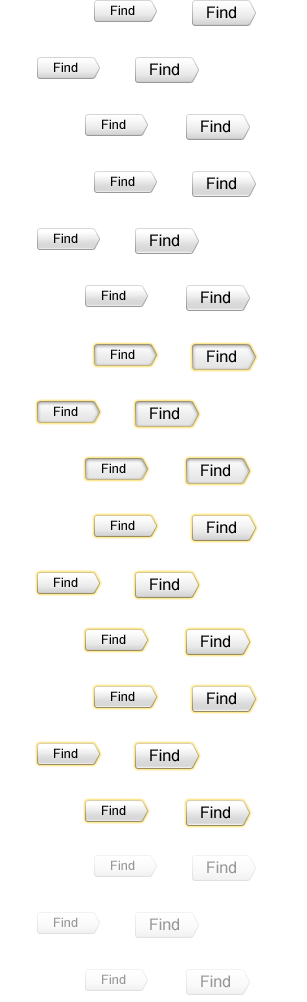
<style>
.page{position:relative;width:307px;height:1002px;background:#ffffff}
.page>*{position:absolute;margin:0}
.t1{font:13px "ArialMT";color:#000000}
.t2{font:16px "ArialMT";color:#000000}
.t3{font:13px "ArialMT";color:#979797}
.t4{font:16px "ArialMT";color:#969696}
</style>
<div class="page">
<p class="t1" style="left:111px;top:5px;width:24px;height:10px">Find</p>
<p class="t2" style="left:207px;top:6px;width:29px;height:13px">Find</p>
<p class="t1" style="left:54px;top:62px;width:24px;height:10px">Find</p>
<p class="t2" style="left:150px;top:63px;width:29px;height:13px">Find</p>
<p class="t1" style="left:102px;top:119px;width:24px;height:10px">Find</p>
<p class="t2" style="left:201px;top:120px;width:29px;height:13px">Find</p>
<p class="t1" style="left:111px;top:176px;width:24px;height:10px">Find</p>
<p class="t2" style="left:207px;top:177px;width:29px;height:13px">Find</p>
<p class="t1" style="left:54px;top:233px;width:24px;height:10px">Find</p>
<p class="t2" style="left:150px;top:234px;width:29px;height:13px">Find</p>
<p class="t1" style="left:102px;top:290px;width:24px;height:10px">Find</p>
<p class="t2" style="left:201px;top:291px;width:29px;height:13px">Find</p>
<p class="t1" style="left:111px;top:349px;width:24px;height:10px">Find</p>
<p class="t2" style="left:207px;top:350px;width:29px;height:13px">Find</p>
<p class="t1" style="left:54px;top:406px;width:24px;height:10px">Find</p>
<p class="t2" style="left:150px;top:407px;width:29px;height:13px">Find</p>
<p class="t1" style="left:102px;top:463px;width:24px;height:10px">Find</p>
<p class="t2" style="left:201px;top:464px;width:29px;height:13px">Find</p>
<p class="t1" style="left:111px;top:520px;width:24px;height:10px">Find</p>
<p class="t2" style="left:207px;top:521px;width:29px;height:13px">Find</p>
<p class="t1" style="left:54px;top:577px;width:24px;height:10px">Find</p>
<p class="t2" style="left:150px;top:578px;width:29px;height:13px">Find</p>
<p class="t1" style="left:102px;top:634px;width:24px;height:10px">Find</p>
<p class="t2" style="left:201px;top:635px;width:29px;height:13px">Find</p>
<p class="t1" style="left:111px;top:691px;width:24px;height:10px">Find</p>
<p class="t2" style="left:207px;top:692px;width:29px;height:13px">Find</p>
<p class="t1" style="left:54px;top:748px;width:24px;height:10px">Find</p>
<p class="t2" style="left:150px;top:749px;width:29px;height:13px">Find</p>
<p class="t1" style="left:102px;top:805px;width:24px;height:10px">Find</p>
<p class="t2" style="left:201px;top:806px;width:29px;height:13px">Find</p>
<p class="t3" style="left:111px;top:860px;width:24px;height:10px">Find</p>
<p class="t4" style="left:207px;top:861px;width:29px;height:13px">Find</p>
<p class="t3" style="left:54px;top:917px;width:24px;height:10px">Find</p>
<p class="t4" style="left:150px;top:918px;width:29px;height:13px">Find</p>
<p class="t3" style="left:102px;top:974px;width:24px;height:10px">Find</p>
<p class="t4" style="left:201px;top:975px;width:29px;height:13px">Find</p>
</div>
